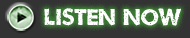
<style>
.page{position:relative;width:190px;height:38px;background:#333333}
.page>*{position:absolute;margin:0}
.t1{font:25.8px "Umbrage";letter-spacing:0.01em;color:#ffffff}
</style>
<div class="page">
<p class="t1" style="left:44px;top:8px;width:137px;height:18px">LISTEN NOW</p>
</div>
